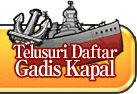
<style>
.page{position:relative;width:137px;height:94px;background:#ffffff}
.page>*{position:absolute;margin:0}
.t1{font:18px/18px "RyuminPro-ExBold";letter-spacing:-0.08em;color:#fff8f4;scale:0.9 1}
.t2{font:22px/18px "RyuminPro-ExBold";letter-spacing:-0.08em;color:#fff8f4;scale:0.9 1}
</style>
<div class="page">
<p class="t1" style="left:13px;top:44px;width:105px;height:36px;text-align:center">Telusuri Daftar<br><span class="t2">Gadis Kapal</span></p>
</div>
